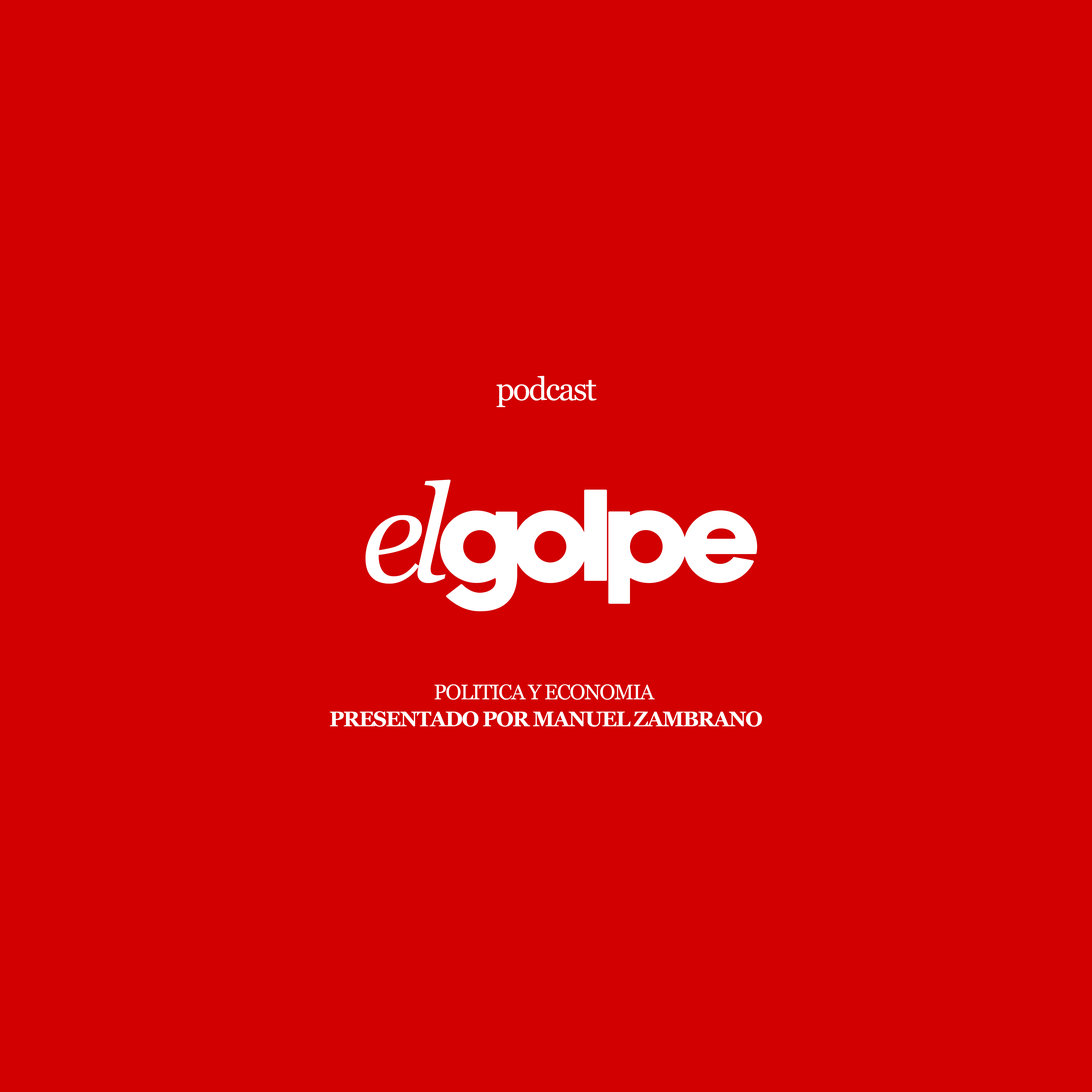
<style>
.page{position:relative;width:1092px;height:1092px;background:#d20000}
.page>*{position:absolute;margin:0}
.t1{font:32.3px "Georgia";letter-spacing:-0.05em;color:#ffffff}
.t2{font:131.2px "NewakeDemo";letter-spacing:-0.05em;color:#ffffff}
.t3{font:134.8px "Georgia-Italic";letter-spacing:-0.1em;color:#ffffff}
.t4{font:21.2px/27px "Georgia-Bold";letter-spacing:-0.05em;color:#ffffff}
.t5{font:21.2px/27px "Georgia";letter-spacing:-0.05em;color:#ffffff}
</style>
<div class="page">
<p class="t1" style="left:496px;top:376px;width:101px;height:31px">podcast</p>
<p class="t2" style="left:365px;top:480px;width:392px;height:131px"><span class="t3">el</span>golpe</p>
<p class="t4" style="left:330px;top:684px;width:432px;height:43px;text-align:center"><span class="t5">POLITICA Y ECONOMIA <br></span>PRESENTADO POR MANUEL ZAMBRANO</p>
</div>
